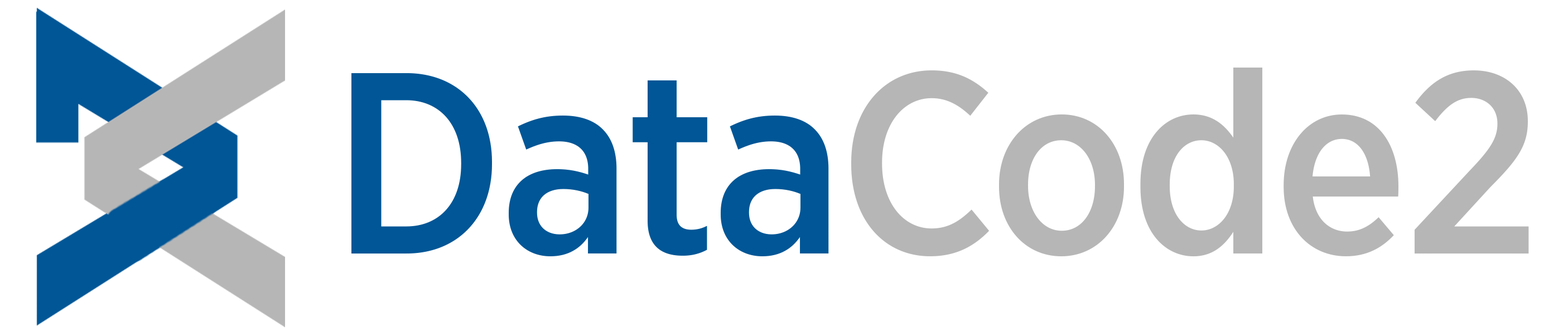
<style>
.page{position:relative;width:1568px;height:335px;background:#ffffff}
.page>*{position:absolute;margin:0}
.t1{font:257.3px "GothamNarrow-Medium";letter-spacing:-0.02em;color:#b6b6b6}
.t2{font:257.3px "GothamNarrow-Medium";letter-spacing:-0.02em;color:#005696}
</style>
<div class="page">
<p class="t1" style="left:351px;top:67px;width:1178px;height:190px"><span class="t2">Data</span>Code2</p>
</div>
